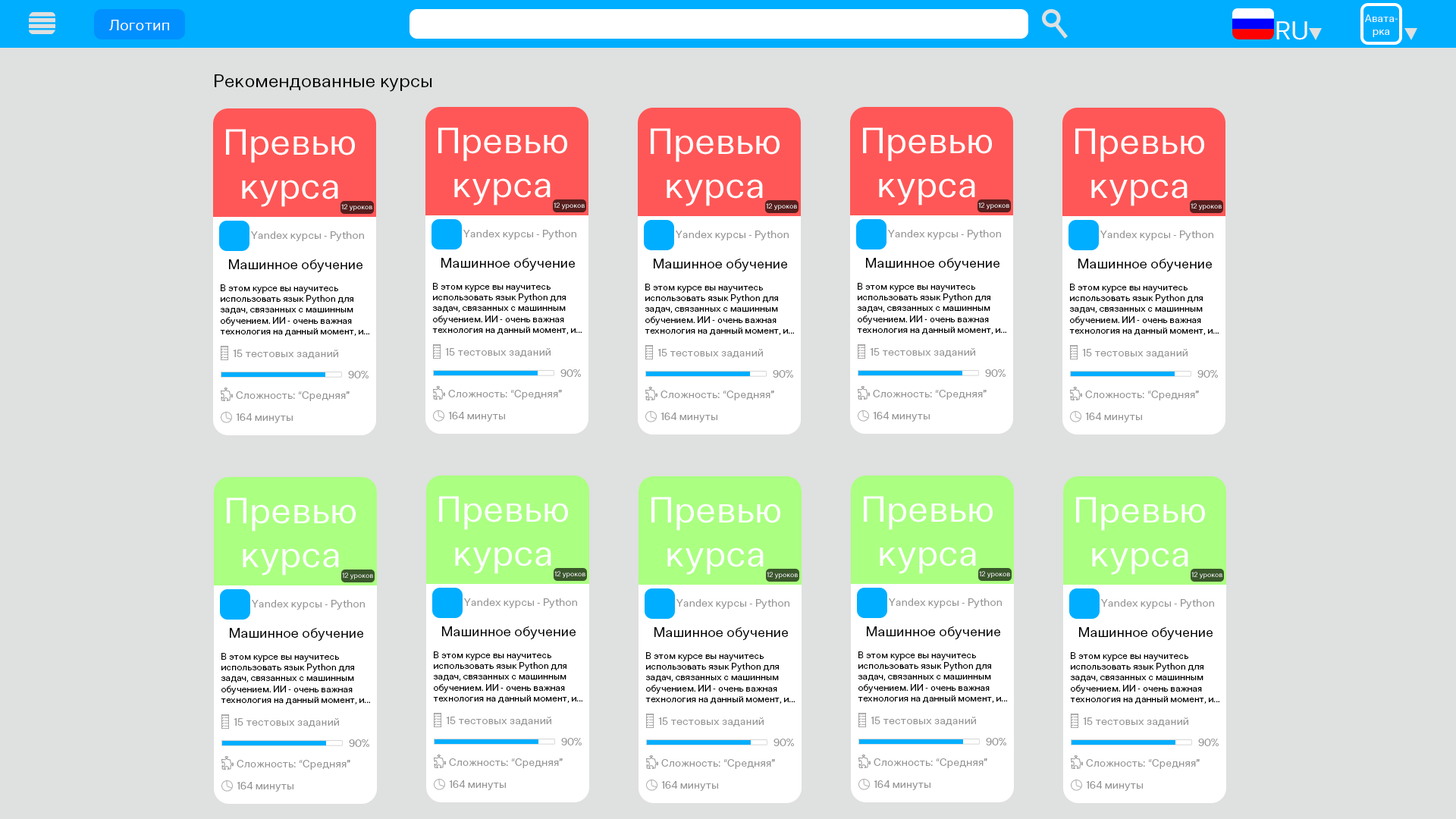
<style>
.page{position:relative;width:1456px;height:819px;background:#dfe0e0}
.page>*{position:absolute;margin:0}
.t1{font:10.6px "ClinicaPro-Regular";color:#ffffff}
.t2{font:15.2px "ClinicaPro-Regular";color:#ffffff}
.t3{font:25.8px "ClinicaPro-Regular";color:#ffffff}
.t4{font:18.2px "ClinicaPro-Regular";color:#000000}
.t5{font:36.4px "ClinicaPro-Regular";color:#ffffff}
.t6{font:22.7px "ClinicaPro-Regular";color:#ffffff}
.t7{font:6.8px "ClinicaPro-Regular";color:#ffffff}
.t8{font:10.6px "ClinicaPro-Regular";color:#969595}
.t9{font:13.6px "ClinicaPro-Regular";color:#000000}
.t10{font:9.1px "ClinicaPro-Regular";color:#000000}
.t11{font:10.4px "ClinicaPro-Regular";color:#969595}
.t12{font:10.3px "ClinicaPro-Regular";color:#969595}
</style>
<div class="page">
<p class="t1" style="left:1365px;top:14px;width:33px;height:23px;text-align:center">Авата-<br>рка</p>
<p class="t2" style="left:109px;top:20px;width:60px;height:10px">Логотип</p>
<p class="t3" style="left:1276px;top:21px;width:31px;height:19px">RU</p>
<p class="t4" style="left:215px;top:74px;width:217px;height:18px">Рекомендованные курсы</p>
<p class="t5" style="left:226px;top:129px;width:129px;height:78px;text-align:center"><span class="t6"> </span>Превью<br>курса</p>
<p class="t5" style="left:438px;top:127px;width:129px;height:79px;text-align:center"><span class="t6"> </span>Превью<br>курса</p>
<p class="t5" style="left:651px;top:128px;width:129px;height:78px;text-align:center"><span class="t6"> </span>Превью<br>курса</p>
<p class="t5" style="left:863px;top:127px;width:129px;height:79px;text-align:center"><span class="t6"> </span>Превью<br>курса</p>
<p class="t5" style="left:1075px;top:128px;width:129px;height:78px;text-align:center"><span class="t6"> </span>Превью<br>курса</p>
<p class="t7" style="left:341px;top:204px;width:31px;height:7px">12 уроков</p>
<p class="t7" style="left:554px;top:202px;width:31px;height:7px">12 уроков</p>
<p class="t7" style="left:766px;top:203px;width:31px;height:7px">12 уроков</p>
<p class="t7" style="left:978px;top:202px;width:31px;height:7px">12 уроков</p>
<p class="t7" style="left:1191px;top:203px;width:31px;height:7px">12 уроков</p>
<p class="t8" style="left:251px;top:231px;width:113px;height:10px">Yandex курсы - Python</p>
<p class="t8" style="left:463px;top:230px;width:113px;height:10px">Yandex курсы - Python</p>
<p class="t8" style="left:676px;top:231px;width:113px;height:9px">Yandex курсы - Python</p>
<p class="t8" style="left:888px;top:230px;width:113px;height:10px">Yandex курсы - Python</p>
<p class="t8" style="left:1100px;top:231px;width:113px;height:9px">Yandex курсы - Python</p>
<p class="t9" style="left:441px;top:258px;width:134px;height:13px">Машинное обучение</p>
<p class="t9" style="left:866px;top:258px;width:133px;height:13px">Машинное обучение</p>
<p class="t9" style="left:229px;top:259px;width:133px;height:13px">Машинное обучение</p>
<p class="t9" style="left:654px;top:259px;width:133px;height:12px">Машинное обучение</p>
<p class="t9" style="left:1078px;top:259px;width:134px;height:12px">Машинное обучение</p>
<p class="t10" style="left:220px;top:284px;width:149px;height:52px">В этом курсе вы научитесь <br>использовать язык Python для<br>задач, связанных с машинным<br>обучением. ИИ - очень важная<br>технология на данный момент, и...</p>
<p class="t10" style="left:432px;top:283px;width:150px;height:51px">В этом курсе вы научитесь <br>использовать язык Python для<br>задач, связанных с машинным<br>обучением. ИИ - очень важная<br>технология на данный момент, и...</p>
<p class="t10" style="left:645px;top:284px;width:149px;height:51px">В этом курсе вы научитесь <br>использовать язык Python для<br>задач, связанных с машинным<br>обучением. ИИ - очень важная<br>технология на данный момент, и...</p>
<p class="t10" style="left:857px;top:283px;width:149px;height:51px">В этом курсе вы научитесь <br>использовать язык Python для<br>задач, связанных с машинным<br>обучением. ИИ - очень важная<br>технология на данный момент, и...</p>
<p class="t10" style="left:1069px;top:284px;width:150px;height:51px">В этом курсе вы научитесь <br>использовать язык Python для<br>задач, связанных с машинным<br>обучением. ИИ - очень важная<br>технология на данный момент, и...</p>
<p class="t8" style="left:233px;top:350px;width:105px;height:9px">15 тестовых заданий</p>
<p class="t8" style="left:445px;top:348px;width:106px;height:10px">15 тестовых заданий</p>
<p class="t8" style="left:657px;top:349px;width:106px;height:10px">15 тестовых заданий</p>
<p class="t8" style="left:870px;top:348px;width:105px;height:10px">15 тестовых заданий</p>
<p class="t8" style="left:1082px;top:349px;width:106px;height:10px">15 тестовых заданий</p>
<p class="t11" style="left:348px;top:371px;width:21px;height:7px">90%</p>
<p class="t11" style="left:560px;top:369px;width:21px;height:8px">90%</p>
<p class="t11" style="left:773px;top:370px;width:20px;height:8px">90%</p>
<p class="t11" style="left:985px;top:369px;width:21px;height:8px">90%</p>
<p class="t11" style="left:1197px;top:370px;width:21px;height:8px">90%</p>
<p class="t11" style="left:448px;top:390px;width:114px;height:10px">Сложность: “Средняя”</p>
<p class="t11" style="left:873px;top:390px;width:114px;height:10px">Сложность: “Средняя”</p>
<p class="t11" style="left:236px;top:391px;width:114px;height:10px">Сложность: “Средняя”</p>
<p class="t11" style="left:660px;top:391px;width:114px;height:9px">Сложность: “Средняя”</p>
<p class="t11" style="left:1085px;top:391px;width:114px;height:9px">Сложность: “Средняя”</p>
<p class="t12" style="left:236px;top:413px;width:57px;height:10px">164 минуты</p>
<p class="t12" style="left:448px;top:412px;width:57px;height:10px">164 минуты</p>
<p class="t12" style="left:660px;top:413px;width:57px;height:9px">164 минуты</p>
<p class="t12" style="left:873px;top:412px;width:57px;height:10px">164 минуты</p>
<p class="t12" style="left:1085px;top:413px;width:57px;height:9px">164 минуты</p>
<p class="t5" style="left:227px;top:497px;width:129px;height:79px;text-align:center"><span class="t6"> </span>Превью<br>курса</p>
<p class="t5" style="left:439px;top:496px;width:129px;height:78px;text-align:center"><span class="t6"> </span>Превью<br>курса</p>
<p class="t5" style="left:651px;top:497px;width:129px;height:78px;text-align:center"><span class="t6"> </span>Превью<br>курса</p>
<p class="t5" style="left:864px;top:496px;width:129px;height:78px;text-align:center"><span class="t6"> </span>Превью<br>курса</p>
<p class="t5" style="left:1076px;top:497px;width:129px;height:78px;text-align:center"><span class="t6"> </span>Превью<br>курса</p>
<p class="t7" style="left:342px;top:573px;width:31px;height:6px">12 уроков</p>
<p class="t7" style="left:554px;top:571px;width:31px;height:7px">12 уроков</p>
<p class="t7" style="left:767px;top:572px;width:31px;height:7px">12 уроков</p>
<p class="t7" style="left:979px;top:571px;width:31px;height:7px">12 уроков</p>
<p class="t7" style="left:1191px;top:572px;width:31px;height:7px">12 уроков</p>
<p class="t8" style="left:252px;top:600px;width:113px;height:10px">Yandex курсы - Python</p>
<p class="t8" style="left:464px;top:598px;width:113px;height:10px">Yandex курсы - Python</p>
<p class="t8" style="left:676px;top:599px;width:113px;height:10px">Yandex курсы - Python</p>
<p class="t8" style="left:889px;top:598px;width:113px;height:10px">Yandex курсы - Python</p>
<p class="t8" style="left:1101px;top:599px;width:113px;height:10px">Yandex курсы - Python</p>
<p class="t9" style="left:230px;top:628px;width:133px;height:13px">Машинное обучение</p>
<p class="t9" style="left:442px;top:626px;width:134px;height:13px">Машинное обучение</p>
<p class="t9" style="left:654px;top:627px;width:134px;height:13px">Машинное обучение</p>
<p class="t9" style="left:867px;top:626px;width:133px;height:13px">Машинное обучение</p>
<p class="t9" style="left:1079px;top:627px;width:134px;height:13px">Машинное обучение</p>
<p class="t10" style="left:221px;top:653px;width:149px;height:51px">В этом курсе вы научитесь <br>использовать язык Python для<br>задач, связанных с машинным<br>обучением. ИИ - очень важная<br>технология на данный момент, и...</p>
<p class="t10" style="left:433px;top:651px;width:149px;height:52px">В этом курсе вы научитесь <br>использовать язык Python для<br>задач, связанных с машинным<br>обучением. ИИ - очень важная<br>технология на данный момент, и...</p>
<p class="t10" style="left:645px;top:652px;width:150px;height:52px">В этом курсе вы научитесь <br>использовать язык Python для<br>задач, связанных с машинным<br>обучением. ИИ - очень важная<br>технология на данный момент, и...</p>
<p class="t10" style="left:858px;top:651px;width:149px;height:52px">В этом курсе вы научитесь <br>использовать язык Python для<br>задач, связанных с машинным<br>обучением. ИИ - очень важная<br>технология на данный момент, и...</p>
<p class="t10" style="left:1070px;top:652px;width:149px;height:52px">В этом курсе вы научитесь <br>использовать язык Python для<br>задач, связанных с машинным<br>обучением. ИИ - очень важная<br>технология на данный момент, и...</p>
<p class="t8" style="left:234px;top:718px;width:105px;height:10px">15 тестовых заданий</p>
<p class="t8" style="left:446px;top:717px;width:105px;height:9px">15 тестовых заданий</p>
<p class="t8" style="left:658px;top:717px;width:106px;height:10px">15 тестовых заданий</p>
<p class="t8" style="left:871px;top:717px;width:105px;height:9px">15 тестовых заданий</p>
<p class="t8" style="left:1083px;top:717px;width:105px;height:10px">15 тестовых заданий</p>
<p class="t11" style="left:561px;top:738px;width:21px;height:7px">90%</p>
<p class="t11" style="left:986px;top:738px;width:20px;height:7px">90%</p>
<p class="t11" style="left:349px;top:739px;width:20px;height:8px">90%</p>
<p class="t11" style="left:773px;top:739px;width:21px;height:7px">90%</p>
<p class="t11" style="left:1198px;top:739px;width:21px;height:7px">90%</p>
<p class="t11" style="left:237px;top:760px;width:113px;height:10px">Сложность: “Средняя”</p>
<p class="t11" style="left:449px;top:758px;width:114px;height:10px">Сложность: “Средняя”</p>
<p class="t11" style="left:661px;top:759px;width:114px;height:10px">Сложность: “Средняя”</p>
<p class="t11" style="left:874px;top:758px;width:113px;height:10px">Сложность: “Средняя”</p>
<p class="t11" style="left:1086px;top:759px;width:114px;height:10px">Сложность: “Средняя”</p>
<p class="t12" style="left:237px;top:782px;width:56px;height:10px">164 минуты</p>
<p class="t12" style="left:449px;top:780px;width:57px;height:10px">164 минуты</p>
<p class="t12" style="left:661px;top:781px;width:57px;height:10px">164 минуты</p>
<p class="t12" style="left:874px;top:780px;width:56px;height:10px">164 минуты</p>
<p class="t12" style="left:1086px;top:781px;width:57px;height:10px">164 минуты</p>
</div>
